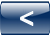
<style>
.page{position:relative;width:50px;height:35px}
.page>*{position:absolute;margin:0}
.t1{font:32px "Calibri-Bold";color:#f8fafc}
</style>
<div class="page">
<p class="t1" style="left:20px;top:11px;width:14px;height:15px">&lt;</p>
</div>
